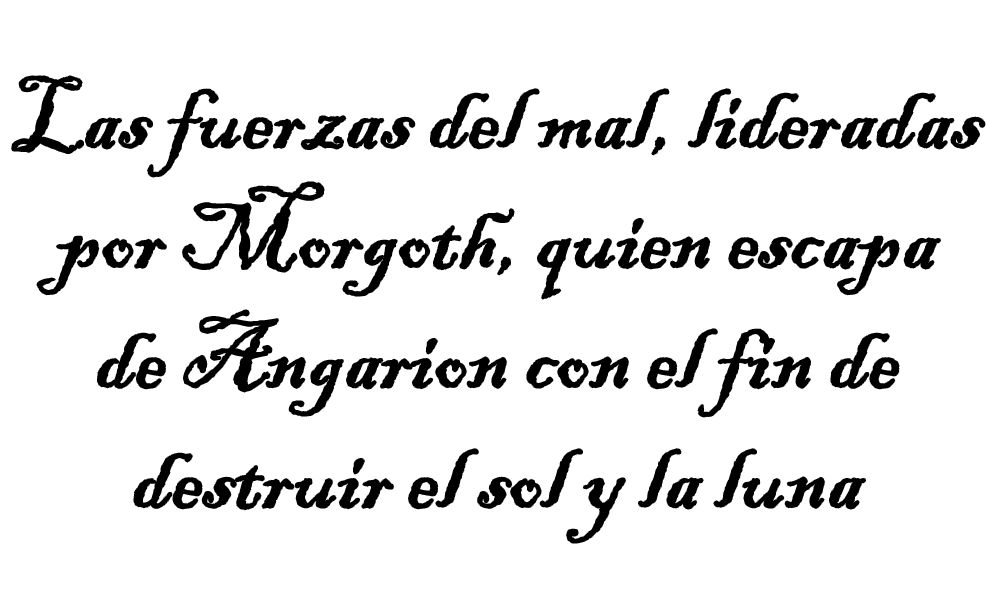
<style>
.page{position:relative;width:1000px;height:600px;background:#ffffff}
.page>*{position:absolute;margin:0}
.t1{font:100px "BlackadderITC-Regular";color:#000000}
</style>
<div class="page">
<p class="t1" style="left:12px;top:76px;width:973px;height:467px;text-align:center">Las fuerzas del mal, lideradas<br>por Morgoth, quien escapa<br>de Angarion con el fin de<br>destruir el sol y la luna</p>
</div>
